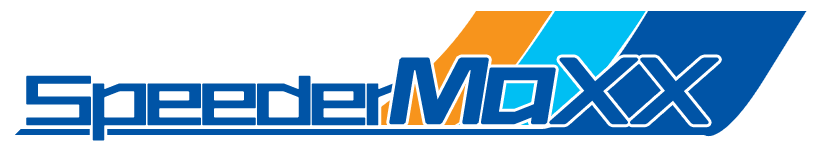
<style>
.page{position:relative;width:820px;height:150px;background:#ffffff}
.page>*{position:absolute;margin:0}
.t1{font:93.6px "AstraAfsb07MediumT";letter-spacing:-0.06em;color:#0054a6;font-weight:bold;font-style:italic;scale:0.92 1}
.t2{font:72px "AstraAfsb07MediumT";letter-spacing:-0.06em;color:#0054a6}
</style>
<div class="page">
<p class="t1" style="left:389px;top:57px;width:330px;height:68px">MaXX</p>
<p class="t2" style="left:26px;top:75px;width:383px;height:66px">Speeder</p>
</div>
